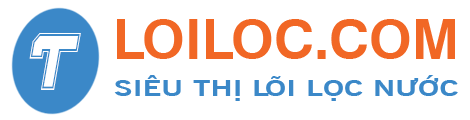
<style>
.page{position:relative;width:470px;height:120px;background:#ffffff}
.page>*{position:absolute;margin:0}
.t1{font:54px "UVNHongHaBold";color:#f16725}
.t2{font:85.1px "TravelerProItalic";color:#ffffff;scale:0.66 1}
.t3{font:21.8px "UVNTinTucBold";color:#3b88c8;scale:1.43 1}
</style>
<div class="page">
<p class="t1" style="left:117px;top:19px;width:338px;height:40px">LOILOC.COM</p>
<p class="t2" style="left:29px;top:33px;width:52px;height:57px">T</p>
<p class="t3" style="left:114px;top:75px;width:344px;height:26px">SIÊU THỊ LÕI LỌC NƯỚC</p>
</div>
